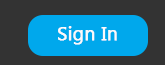
<style>
.page{position:relative;width:165px;height:65px;background:#333333}
.page>*{position:absolute;margin:0}
.t1{font:19px "MicrosoftTaiLe";color:#fcfafa;font-weight:bold}
</style>
<div class="page">
<p class="t1" style="left:58px;top:26px;width:59px;height:19px">Sign In</p>
</div>
